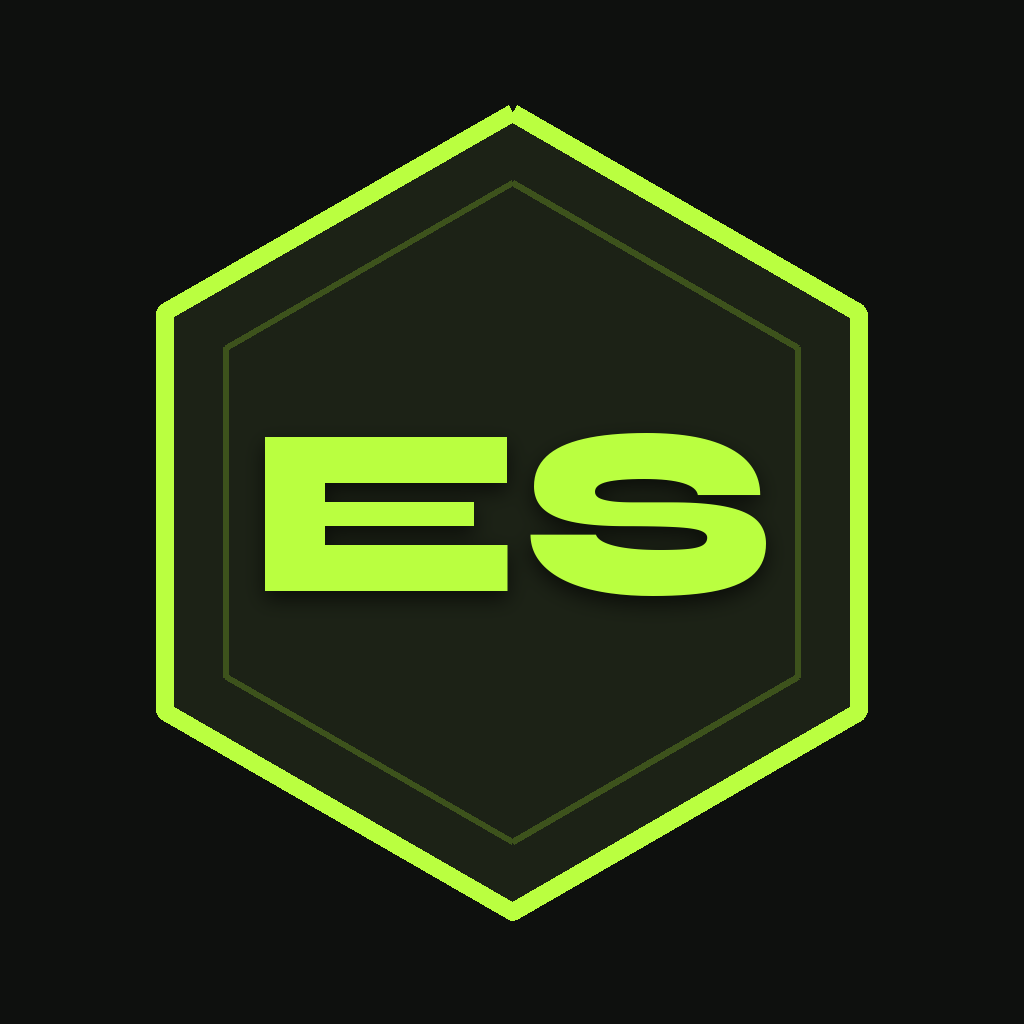
<style>
.page{position:relative;width:1024px;height:1024px;background:#0e100e}
.page>*{position:absolute;margin:0}
.t1{font:240px "Syne-ExtraBold";color:#baff40}
</style>
<div class="page">
<p class="t1" style="left:265px;top:433px;width:501px;height:163px">ES</p>
</div>
